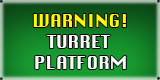
<style>
.page{position:relative;width:160px;height:80px}
.page>*{position:absolute;margin:0}
.t1{font:17.5px "Silom";color:#fbfbfb}
.t2{font:17.5px "Silom";color:#fff600}
</style>
<div class="page">
<p class="t1" style="left:33px;top:14px;width:93px;height:55px;text-align:center"><span class="t2">WARNING!<br></span>TURRET <br>PLATFORM</p>
</div>
